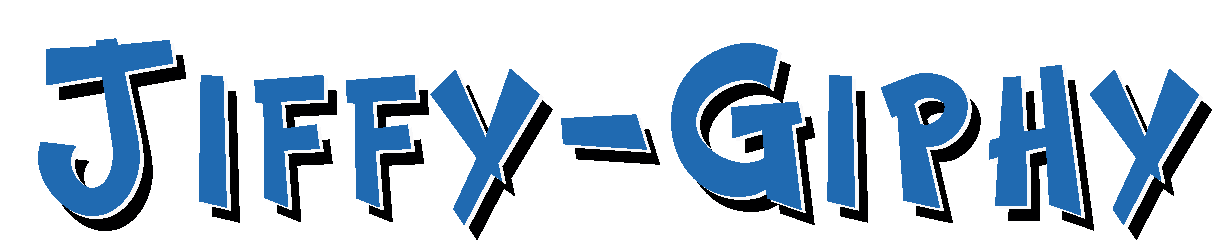
<style>
.page{position:relative;width:1224px;height:250px;background:#ffffff}
.page>*{position:absolute;margin:0}
.t1{font:191.1px "CosmicTwoPlain";letter-spacing:0.02em;color:#206ab1;font-weight:bold}
.t2{font:191.1px "CosmicTwoPlain";letter-spacing:0.02em;font-weight:bold}
</style>
<div class="page">
<p class="t1" style="left:38px;top:38px;width:1161px;height:187px">Jiffy-Giphy</p>
<p class="t1" style="left:42px;top:41px;width:1161px;height:187px">Jiffy-Giphy</p>
<p class="t2" style="left:51px;top:53px;width:1161px;height:187px">Jiffy-Giphy</p>
</div>
